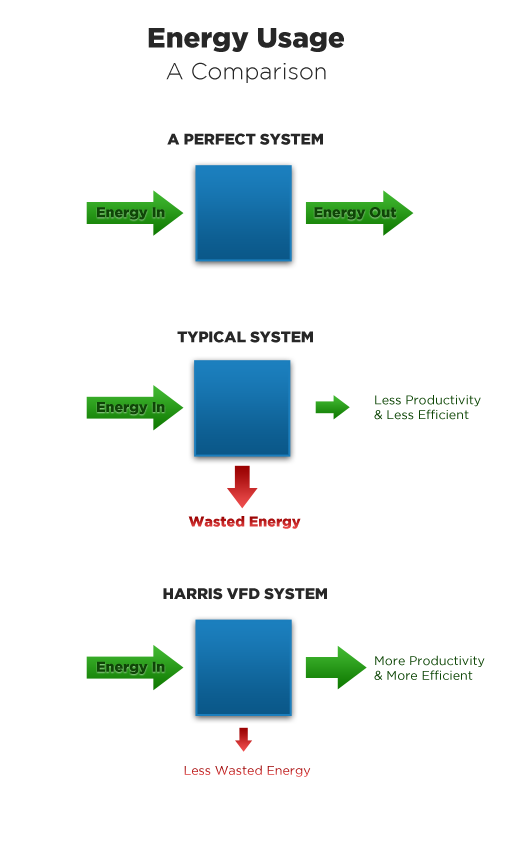
<style>
.page{position:relative;width:518px;height:851px;background:#ffffff}
.page>*{position:absolute;margin:0}
.t1{font:28px "GothamBlack";color:#272727}
.t2{font:23px "GothamLight";color:#272727}
.t3{font:15.2px "GothamBlack";color:#272727;text-transform:uppercase}
.t4{font:14.3px "GothamBlack";color:#0f4707}
.t5{font:12.5px "GothamBook";color:#0f4707}
.t6{font:14.3px "GothamBlack"}
.t7{font:12.5px "GothamBook";color:#bf2323}
</style>
<div class="page">
<p class="t1" style="left:148px;top:28px;width:196px;height:24px">Energy Usage</p>
<p class="t2" style="left:166px;top:62px;width:160px;height:21px">A Comparison</p>
<p class="t3" style="left:167px;top:133px;width:156px;height:12px">A Perfect System</p>
<p class="t4" style="left:97px;top:207px;width:68px;height:13px">Energy In</p>
<p class="t4" style="left:314px;top:207px;width:82px;height:13px">Energy Out</p>
<p class="t3" style="left:177px;top:331px;width:136px;height:12px">Typical System</p>
<p class="t5" style="left:374px;top:395px;width:107px;height:25px">Less Productivity <br>&amp; Less Efficient</p>
<p class="t4" style="left:97px;top:402px;width:68px;height:13px">Energy In</p>
<p class="t6" style="left:188px;top:516px;width:113px;height:13px">Wasted Energy</p>
<p class="t3" style="left:163px;top:588px;width:164px;height:12px">Harris VFD System</p>
<p class="t4" style="left:97px;top:661px;width:68px;height:13px">Energy In</p>
<p class="t5" style="left:374px;top:655px;width:111px;height:25px">More Productivity <br>&amp; More Efficient</p>
<p class="t7" style="left:184px;top:765px;width:127px;height:12px">Less Wasted Energy</p>
</div>
